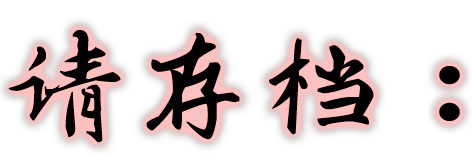
<style>
.page{position:relative;width:472px;height:165px;background:#ffffff}
.page>*{position:absolute;margin:0}
.t1{font:119.4px "SentyZHAO";color:#020000}
</style>
<div class="page">
<p class="t1" style="left:8px;top:30px;width:452px;height:113px">请存档：</p>
</div>
